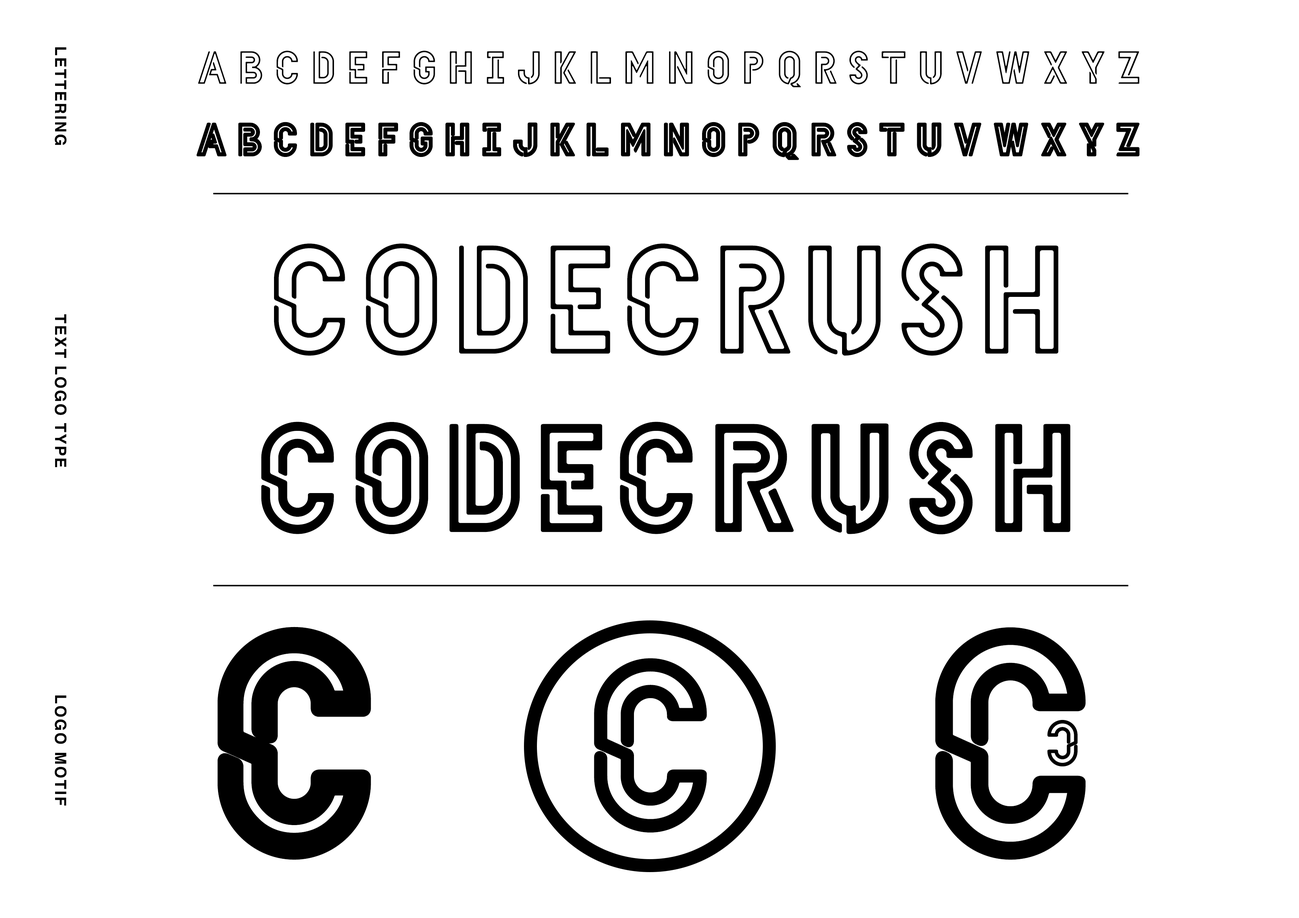
<style>
.page{position:relative;width:1299px;height:918px;background:#ffffff}
.page>*{position:absolute;margin:0}
.t1{font:15.4px "Helvetica-Bold";letter-spacing:0.1em;color:#000000}
.t2{font:46.3px "HELLODENVERDISPLAYREGULAR-Regular";letter-spacing:0.265em;color:#000000}
.t3{font:46.3px "HELLODENVERDISPLAYBOLD-Bold";letter-spacing:0.22em;color:#000000;font-weight:bold}
.t4{font:154.3px "HELLODENVERDISPLAYREGULAR-Regular";letter-spacing:0.081em;color:#000000}
.t5{font:154.3px "HELLODENVERDISPLAYBOLD-Bold";letter-spacing:0.081em;color:#000000}
.t6{font:308.5px "HELLODENVERDISPLAYBOLD-Bold";letter-spacing:0.1em;color:#000000;font-weight:bold}
.t7{font:308.5px "HELLODENVERDISPLAYREGULAR-Regular";letter-spacing:0.1em;color:#000000;font-weight:bold}
.t8{font:231.4px "HELLODENVERDISPLAYREGULAR-Regular";letter-spacing:0.1em;color:#000000;font-weight:bold}
.t9{font:61.7px "HELLODENVERDISPLAYREGULAR-Regular";letter-spacing:0.1em;color:#000000;font-weight:bold}
</style>
<div class="page">
<p class="t1" style="left:54px;top:47px;width:13px;height:98px;rotate:90deg">LETTERING</p>
<p class="t2" style="left:198px;top:51px;width:941px;height:36px">ABCDEFGHIJKLMNOPQRSTUVWXYZ</p>
<p class="t3" style="left:196px;top:122px;width:944px;height:38px">ABCDEFGHIJKLMNOPQRSTUVWXYZ</p>
<p class="t4" style="left:274px;top:244px;width:784px;height:112px">CODECRUSH</p>
<p class="t1" style="left:54px;top:314px;width:13px;height:153px;rotate:90deg">TEXT LOGO TYPE</p>
<p class="t5" style="left:261px;top:422px;width:809px;height:113px">CODECRUSH</p>
<p class="t6" style="left:217px;top:627px;width:154px;height:233px">C</p>
<p class="t7" style="left:935px;top:627px;width:150px;height:233px">C</p>
<p class="t8" style="left:594px;top:658px;width:113px;height:175px">C</p>
<p class="t1" style="left:54px;top:695px;width:13px;height:111px;rotate:90deg">LOGO MOTIF</p>
<p class="t9" style="left:1047px;top:720px;width:30px;height:47px;rotate:-180deg">C</p>
</div>
